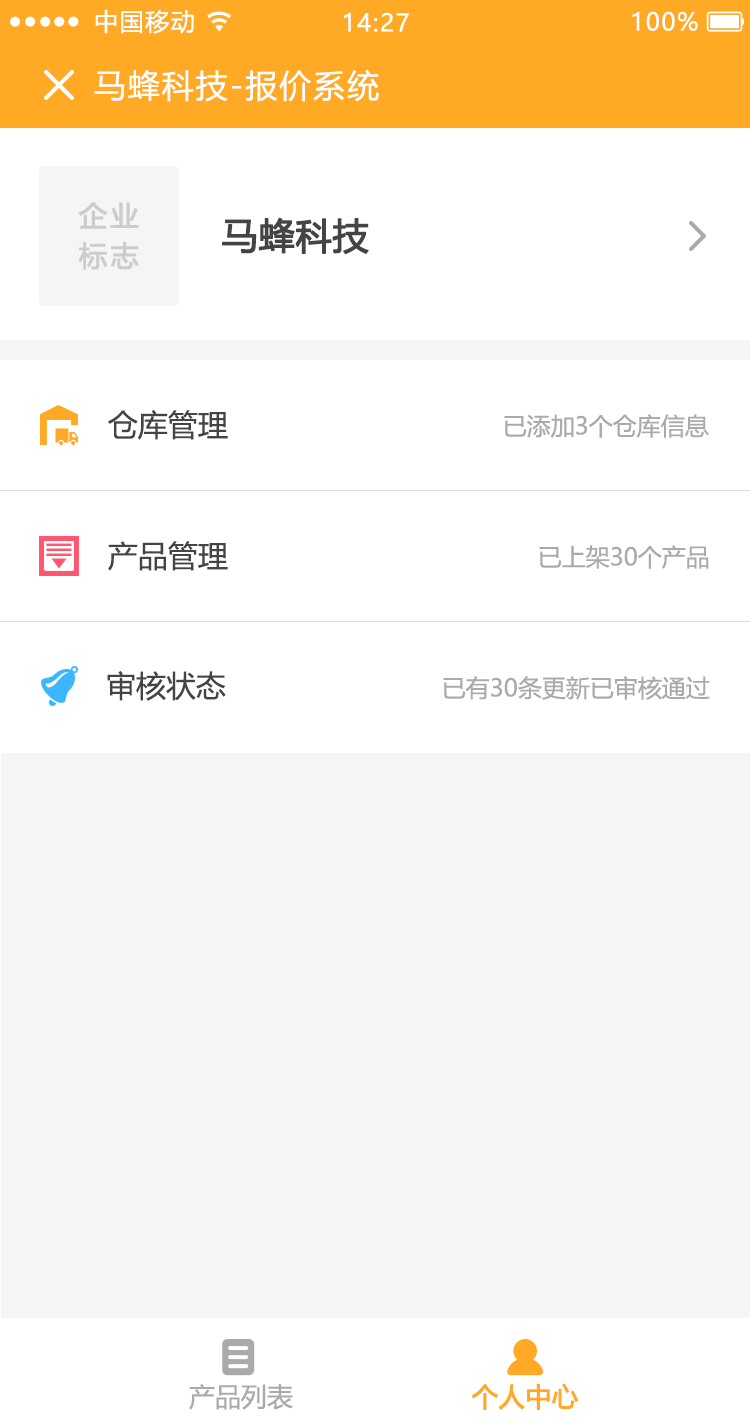
<style>
.page{position:relative;width:750px;height:1424px;background:#ffffff}
.page>*{position:absolute;margin:0}
.t1{font:24px "MicrosoftYaHeiUI";letter-spacing:0.06em;color:#ffffff}
.t2{font:32px "MicrosoftYaHeiUI";letter-spacing:0.06em;color:#ffffff}
.t3{font:28px/40px "MicrosoftYaHeiUI";letter-spacing:0.1em;color:#cccccc;font-weight:bold}
.t4{font:36px "MicrosoftYaHeiUI";color:#444444;font-weight:bold}
.t5{font:30px "MicrosoftYaHeiUI";color:#444444}
.t6{font:24px "MicrosoftYaHeiUI";color:#aaaaaa}
.t7{font:26.2px "MicrosoftYaHeiUI";color:#aaaaaa}
.t8{font:26.2px "MicrosoftYaHeiUI";color:#ffa924;font-weight:bold}
</style>
<div class="page">
<p class="t1" style="left:95px;top:9px;width:99px;height:25px">中国移动</p>
<p class="t1" style="left:344px;top:12px;width:65px;height:20px">14:27</p>
<p class="t1" style="left:632px;top:11px;width:66px;height:20px">100%</p>
<p class="t2" style="left:94px;top:69px;width:285px;height:33px">马蜂科技-报价系统</p>
<p class="t3" style="left:78px;top:202px;width:61px;height:68px">企业<br>标志</p>
<p class="t4" style="left:222px;top:217px;width:147px;height:38px">马蜂科技</p>
<p class="t5" style="left:108px;top:410px;width:120px;height:30px">仓库管理</p>
<p class="t6" style="left:504px;top:414px;width:205px;height:24px">已添加3个仓库信息</p>
<p class="t5" style="left:108px;top:541px;width:120px;height:30px">产品管理</p>
<p class="t6" style="left:539px;top:545px;width:170px;height:24px">已上架30个产品</p>
<p class="t5" style="left:107px;top:671px;width:119px;height:30px">审核状态</p>
<p class="t6" style="left:443px;top:676px;width:267px;height:24px">已有30条更新已审核通过</p>
<p class="t7" style="left:189px;top:1384px;width:104px;height:26px">产品列表</p>
<p class="t8" style="left:471px;top:1383px;width:108px;height:27px">个人中心</p>
</div>
